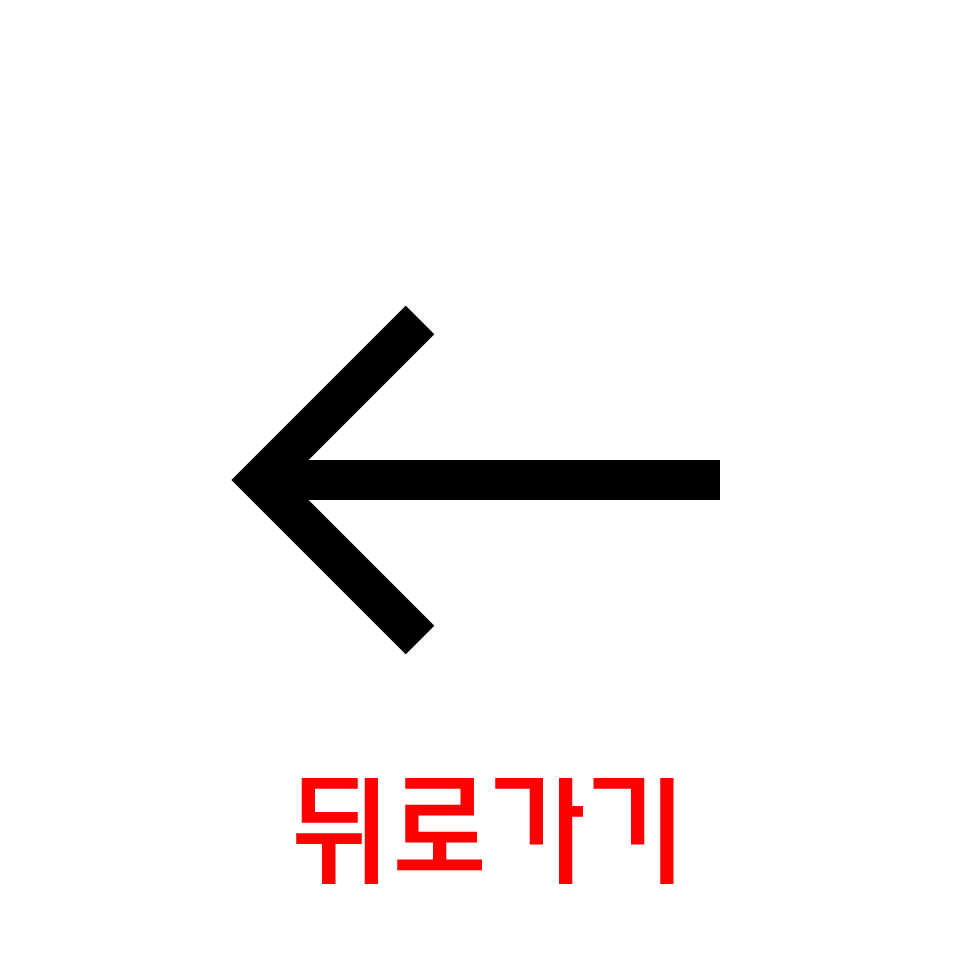
<style>
.page{position:relative;width:960px;height:960px;background:#ffffff}
.page>*{position:absolute;margin:0}
.t1{font:120px "MoeumTR-HM";color:#ff0000}
</style>
<div class="page">
<p class="t1" style="left:296px;top:778px;width:378px;height:106px">뒤로가기</p>
</div>
